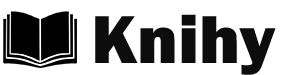
<style>
.page{position:relative;width:282px;height:75px;background:#ffffff}
.page>*{position:absolute;margin:0}
.t1{font:70px "FranklinGothic-Heavy";color:#0d0d0d}
</style>
<div class="page">
<p class="t1" style="left:95px;top:14px;width:181px;height:61px">Knihy</p>
</div>
